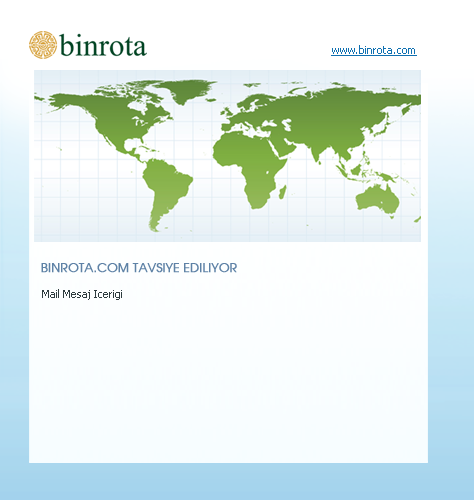
<style>
.page{position:relative;width:474px;height:500px}
.page>*{position:absolute;margin:0}
.t1{font:11px "Tahoma";color:#0f70b1;text-decoration:underline}
.t2{font:12px "TRAvalonPlain";color:#5e82a6;font-weight:bold}
.t3{font:11px "Tahoma";color:#2e3c3f}
</style>
<div class="page">
<p class="t1" style="left:331px;top:45px;width:86px;height:11px">www.binrota.com</p>
<p class="t2" style="left:41px;top:263px;width:196px;height:10px">BINROTA.COM TAVSIYE EDILIYOR</p>
<p class="t3" style="left:42px;top:289px;width:80px;height:11px">Mail Mesaj Icerigi</p>
</div>
